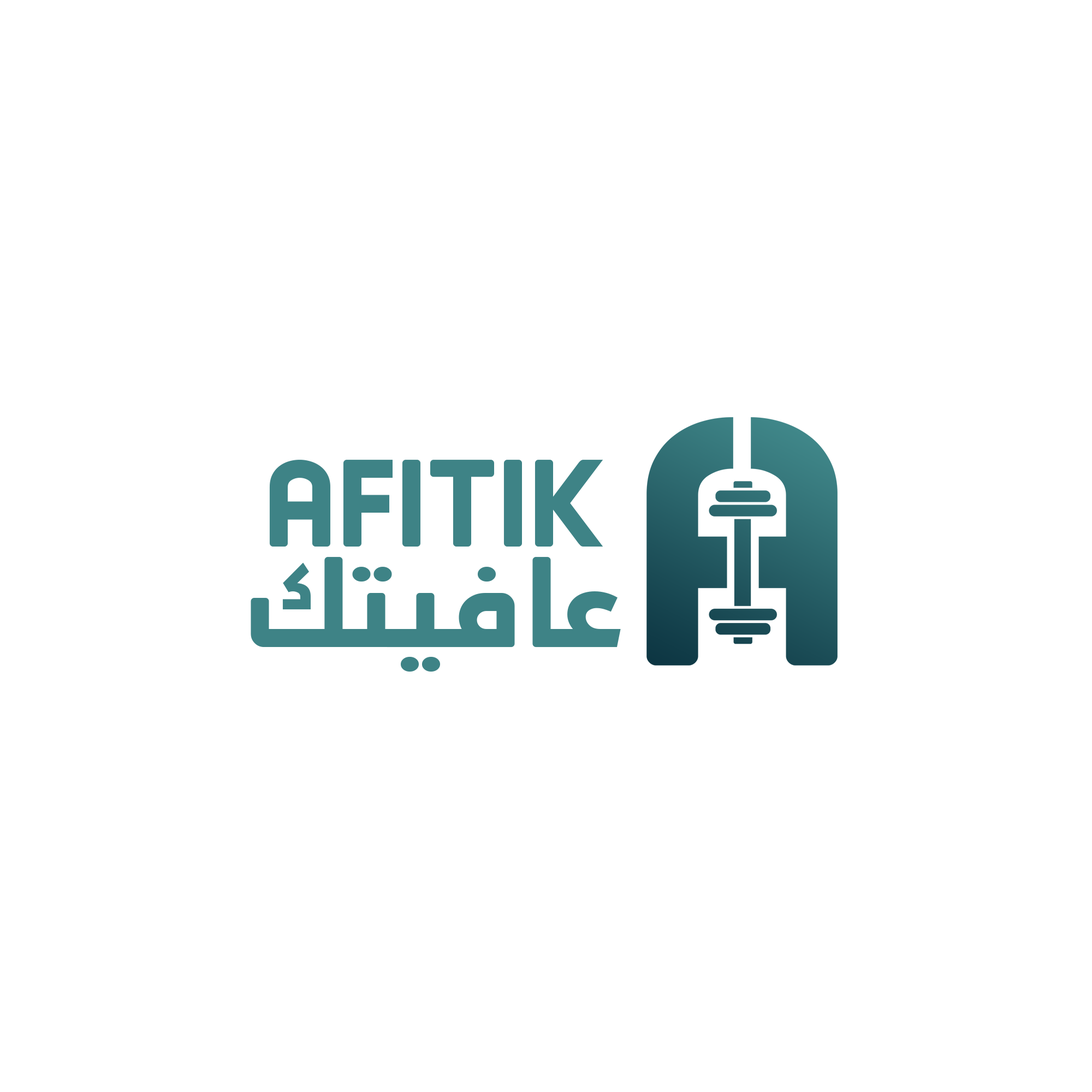
<style>
.page{position:relative;width:1092px;height:1092px;background:#ffffff}
.page>*{position:absolute;margin:0}
.t1{font:114.6px "AbdoMaster-Bold";color:#3e8386}
</style>
<div class="page">
<p class="t1" style="left:269px;top:460px;width:334px;height:87px">AFITIK</p>
<p class="t1" style="left:251px;top:557px;width:370px;height:115px">عافيتك</p>
</div>
